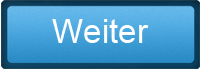
<style>
.page{position:relative;width:200px;height:70px}
.page>*{position:absolute;margin:0}
.t1{font:33.3px "ArialMT";color:#ffffff}
</style>
<div class="page">
<p class="t1" style="left:52px;top:19px;width:97px;height:24px">Weiter</p>
</div>
